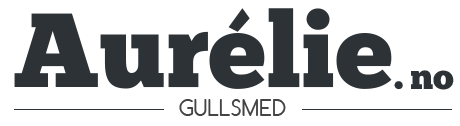
<style>
.page{position:relative;width:460px;height:126px;background:#ffffff}
.page>*{position:absolute;margin:0}
.t1{font:105px "ChunkFive-Roman";color:#2d3236}
.t2{font:36px "ChunkFive-Roman";color:#2d3236}
.t3{font:24px "Comfortaa";color:#444444}
</style>
<div class="page">
<p class="t1" style="left:14px;top:8px;width:378px;height:81px">Aurélie</p>
<p class="t2" style="left:411px;top:70px;width:43px;height:20px">no</p>
<p class="t2" style="left:394px;top:81px;width:9px;height:9px">.</p>
<p class="t3" style="left:179px;top:99px;width:107px;height:17px">GULLSMED</p>
</div>
